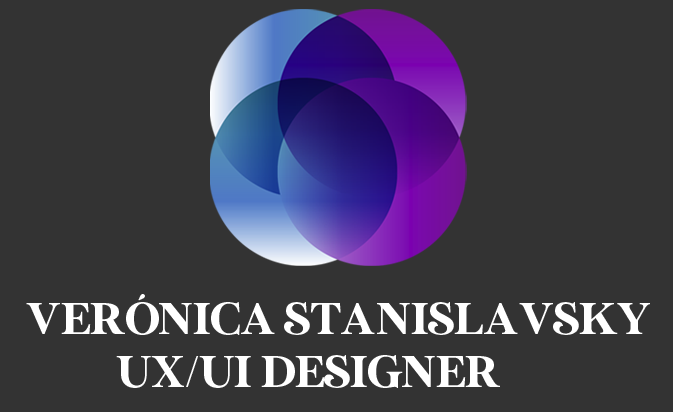
<style>
.page{position:relative;width:673px;height:412px;background:#333333}
.page>*{position:absolute;margin:0}
.t1{font:44.6px "MADESunflower";color:#ffffff}
</style>
<div class="page">
<p class="t1" style="left:26px;top:294px;width:624px;height:41px">VERÓNICA STANISLAVSKY</p>
<p class="t1" style="left:116px;top:355px;width:384px;height:33px">UX/UI DESIGNER</p>
</div>
